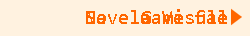
<style>
.page{position:relative;width:250px;height:36px;background:#fff2e0}
.page>*{position:absolute;margin:0}
.t1{font:20px "Consolas";color:#ff6600}
</style>
<div class="page">
<p class="t1" style="left:86px;top:9px;width:141px;height:15px">Novela Visual</p>
<p class="t1" style="left:86px;top:10px;width:141px;height:14px">Save Game file</p>
</div>
